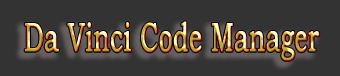
<style>
.page{position:relative;width:340px;height:76px;background:#333333}
.page>*{position:absolute;margin:0}
.t1{font:40.4px "BookmanOldStyle";font-weight:bold;scale:0.61 1}
</style>
<div class="page">
<p class="t1" style="left:24px;top:21px;width:296px;height:40px">Da Vinci Code Manager</p>
</div>
